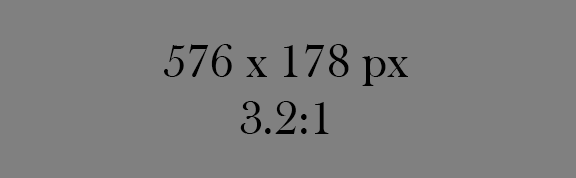
<style>
.page{position:relative;width:576px;height:178px;background:#808080}
.page>*{position:absolute;margin:0}
.t1{font:48px "BaskOldFace";color:#000000}
</style>
<div class="page">
<p class="t1" style="left:164px;top:44px;width:244px;height:90px;text-align:center">576 x 178 px<br>3.2:1</p>
</div>
